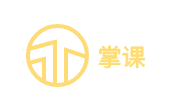
<style>
.page{position:relative;width:177px;height:111px;background:#ffffff}
.page>*{position:absolute;margin:0}
.t1{font:24px "SourceHanSansSC-Regular";color:#fedc74}
</style>
<div class="page">
<p class="t1" style="left:98px;top:44px;width:48px;height:25px">掌课</p>
</div>
